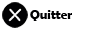
<style>
.page{position:relative;width:100px;height:30px;background:#ffffff}
.page>*{position:absolute;margin:0}
.t1{font:13px "BerlinSansFBDemi-Bold";color:#010103}
</style>
<div class="page">
<p class="t1" style="left:30px;top:10px;width:42px;height:11px">Quitter</p>
</div>
